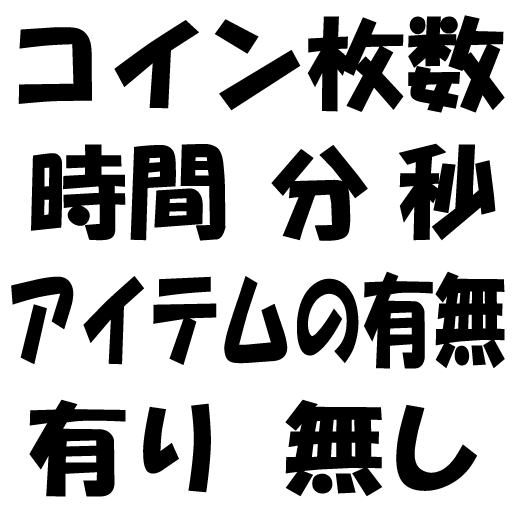
<style>
.page{position:relative;width:512px;height:512px;background:#ffffff}
.page>*{position:absolute;margin:0}
.t1{font:100.4px "HGSSoeiKakupoptai";color:#000000}
.t2{font:100.4px "HGSSoeiKakupoptai";color:#000000;scale:0.71 1}
</style>
<div class="page">
<p class="t1" style="left:18px;top:15px;width:487px;height:98px">コイン枚数</p>
<p class="t1" style="left:31px;top:144px;width:195px;height:97px">時間</p>
<p class="t1" style="left:271px;top:145px;width:97px;height:96px">分</p>
<p class="t1" style="left:399px;top:143px;width:97px;height:98px">秒</p>
<p class="t2" style="left:11px;top:271px;width:494px;height:98px">アイテムの有無</p>
<p class="t1" style="left:29px;top:399px;width:182px;height:98px">有り</p>
<p class="t1" style="left:285px;top:399px;width:192px;height:98px">無し</p>
</div>
